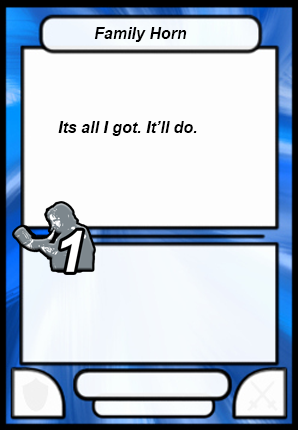
<style>
.page{position:relative;width:298px;height:430px;background:#fdfdfd}
.page>*{position:absolute;margin:0}
.t1{font:16px "Arial-BoldItalicMT";color:#000000}
</style>
<div class="page">
<p class="t1" style="left:94px;top:27px;width:93px;height:15px">Family Horn</p>
<p class="t1" style="left:58px;top:121px;width:139px;height:15px">Its all I got. It’ll do.</p>
</div>
